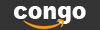
<style>
.page{position:relative;width:100px;height:30px;background:#333333}
.page>*{position:absolute;margin:0}
.t1{font:24.2px "Arial-Black";color:#ffffff;scale:0.91 1}
</style>
<div class="page">
<p class="t1" style="left:14px;top:6px;width:72px;height:18px">congo</p>
</div>
